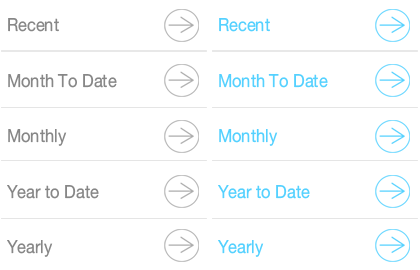
<style>
.page{position:relative;width:420px;height:270px;background:#ffffff}
.page>*{position:absolute;margin:0}
.t1{font:18px/55.5px "HelveticaNeue";color:#878787;scale:0.91 1}
.t2{font:18px/55.5px "HelveticaNeue";color:#55d1ff;scale:0.91 1}
</style>
<div class="page">
<p class="t1" style="left:7px;top:18px;width:110px;height:239px">Recent<br>Month To Date<br>Monthly<br>Year to Date<br>Yearly</p>
<p class="t2" style="left:218px;top:18px;width:110px;height:239px">Recent<br>Month To Date<br>Monthly<br>Year to Date<br>Yearly</p>
</div>
